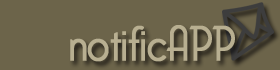
<style>
.page{position:relative;width:280px;height:70px;background:#6c644a}
.page>*{position:absolute;margin:0}
.t1{font:48px "BelleroseLight";color:#b8af91;font-weight:bold;scale:0.9 1}
</style>
<div class="page">
<p class="t1" style="left:70px;top:25px;width:165px;height:37px">notificAPP</p>
</div>
